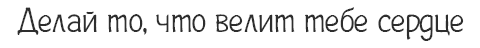
<style>
.page{position:relative;width:480px;height:48px;background:#ffffff}
.page>*{position:absolute;margin:0}
.t1{font:35px "Plainot";color:#2e2e2e}
</style>
<div class="page">
<p class="t1" style="left:17px;top:7px;width:447px;height:34px">Делай то, что велит тебе сердце</p>
</div>
